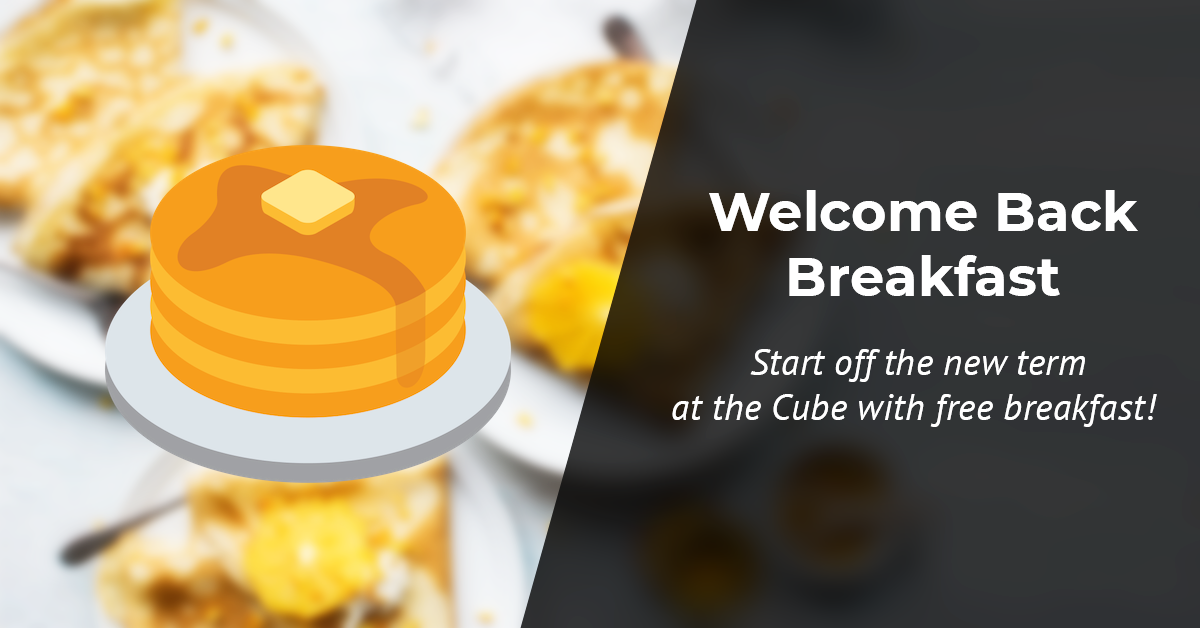
<style>
.page{position:relative;width:1200px;height:628px}
.page>*{position:absolute;margin:0}
.t1{font:54.2px "Montserrat-Bold";letter-spacing:0.005em;color:#ffffff}
.t2{font:37.5px "PTSans-Italic";letter-spacing:0.005em;color:#ffffff}
</style>
<div class="page">
<p class="t1" style="left:709px;top:190px;width:429px;height:106px;text-align:center">Welcome Back<br>Breakfast</p>
<p class="t2" style="left:672px;top:349px;width:485px;height:78px;text-align:center">Start off the new term <br>at the Cube with free breakfast!</p>
</div>
